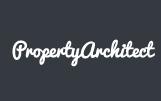
<style>
.page{position:relative;width:161px;height:101px;background:#343a40}
.page>*{position:absolute;margin:0}
.t1{font:19px "Pacifico";color:#ffffff}
</style>
<div class="page">
<p class="t1" style="left:12px;top:39px;width:143px;height:28px">PropertyArchitect</p>
</div>
